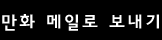
<style>
.page{position:relative;width:162px;height:40px;background:#000000}
.page>*{position:absolute;margin:0}
.t1{font:18px "YDIYGO240-KSCpc-EUC-H";color:#ffffff}
</style>
<div class="page">
<p class="t1" style="left:2px;top:14px;width:157px;height:17px">만화 메일로 보내기</p>
</div>
